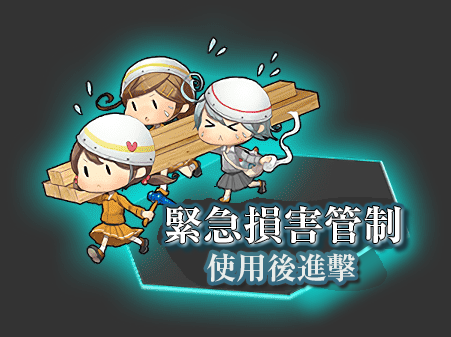
<style>
.page{position:relative;width:451px;height:337px;background:#333333}
.page>*{position:absolute;margin:0}
.t1{font:40px "RyuminPr6N-ExBold";color:#ffffff}
.t2{font:30px "RyuminPr6N-ExBold";color:#e9edea}
</style>
<div class="page">
<p class="t1" style="left:165px;top:206px;width:236px;height:38px">緊急損害管制</p>
<p class="t1" style="left:165px;top:206px;width:236px;height:38px">緊急損害管制</p>
<p class="t2" style="left:207px;top:253px;width:148px;height:29px">使用後進擊</p>
</div>
